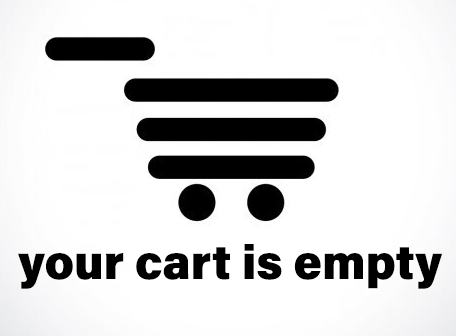
<style>
.page{position:relative;width:456px;height:336px;background:#ffffff}
.page>*{position:absolute;margin:0}
.t1{font:48px "AcuminConcept_786.000wght";color:#000000}
</style>
<div class="page">
<p class="t1" style="left:18px;top:244px;width:424px;height:45px">your cart is empty</p>
</div>
